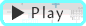
<style>
.page{position:relative;width:86px;height:26px;background:#77ffff}
.page>*{position:absolute;margin:0}
.t1{font:16px "Amira-Roman";letter-spacing:0.1em;color:#333333}
</style>
<div class="page">
<p class="t1" style="left:32px;top:6px;width:32px;height:16px">Play</p>
</div>
